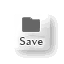
<style>
.page{position:relative;width:64px;height:64px;background:#ffffff}
.page>*{position:absolute;margin:0}
.t1{font:11px "AmiraParadiso";letter-spacing:0.05em;color:#424242}
</style>
<div class="page">
<p class="t1" style="left:19px;top:37px;width:24px;height:8px">Save</p>
</div>
